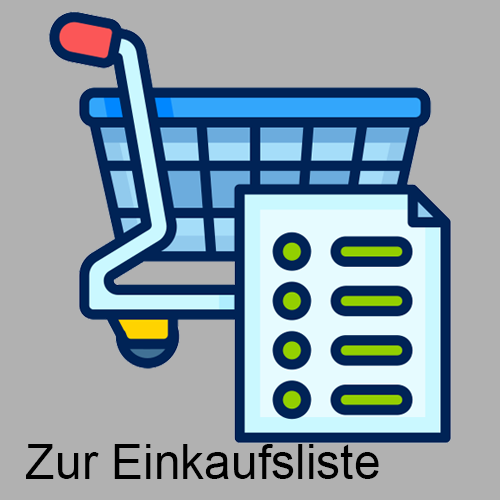
<style>
.page{position:relative;width:500px;height:500px;background:#b1b1b1}
.page>*{position:absolute;margin:0}
.t1{font:48px "ArialMT";color:#000000}
</style>
<div class="page">
<p class="t1" style="left:26px;top:444px;width:353px;height:35px">Zur Einkaufsliste</p>
</div>
